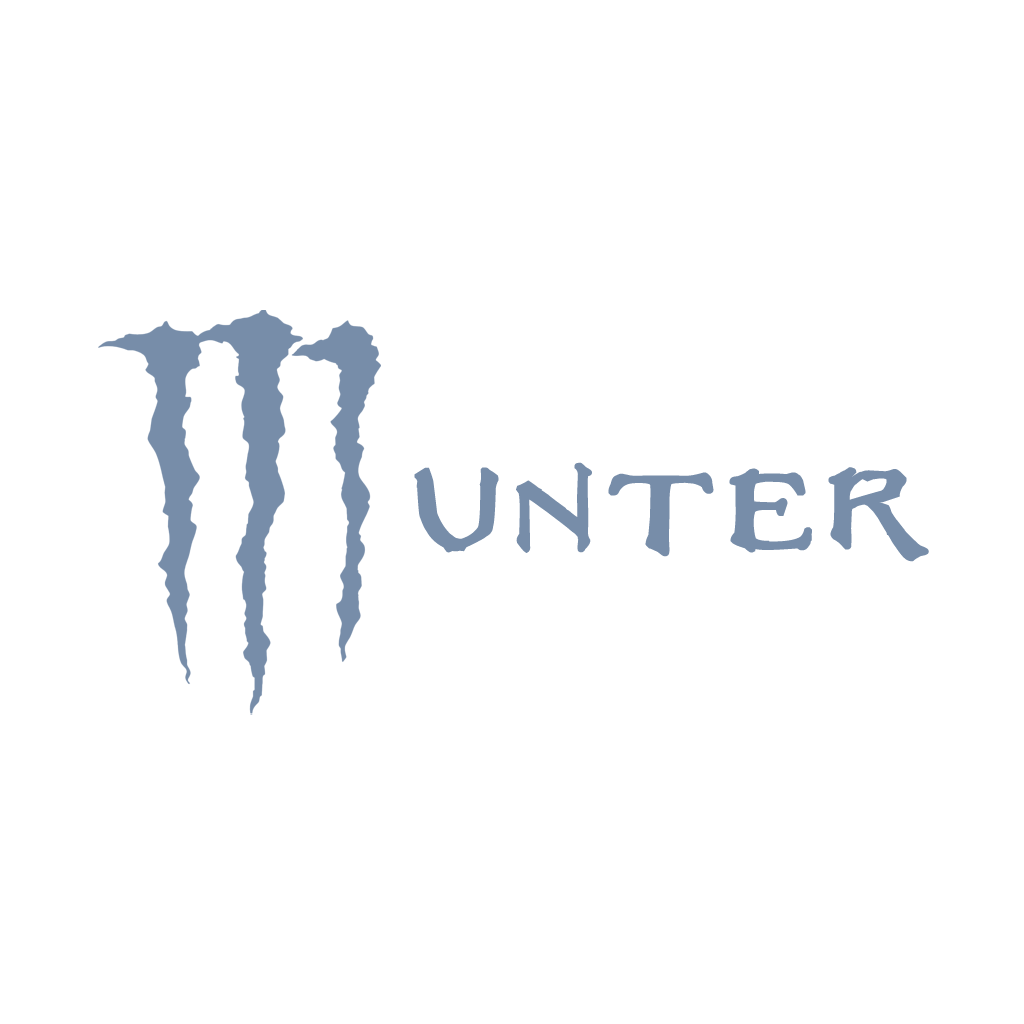
<style>
.page{position:relative;width:1024px;height:1024px;background:#ffffff}
.page>*{position:absolute;margin:0}
.t1{font:175px "UNLEASHTHEBEAST";color:#778da9;font-weight:bold}
</style>
<div class="page">
<p class="t1" style="left:414px;top:462px;width:515px;height:100px">unter</p>
</div>
